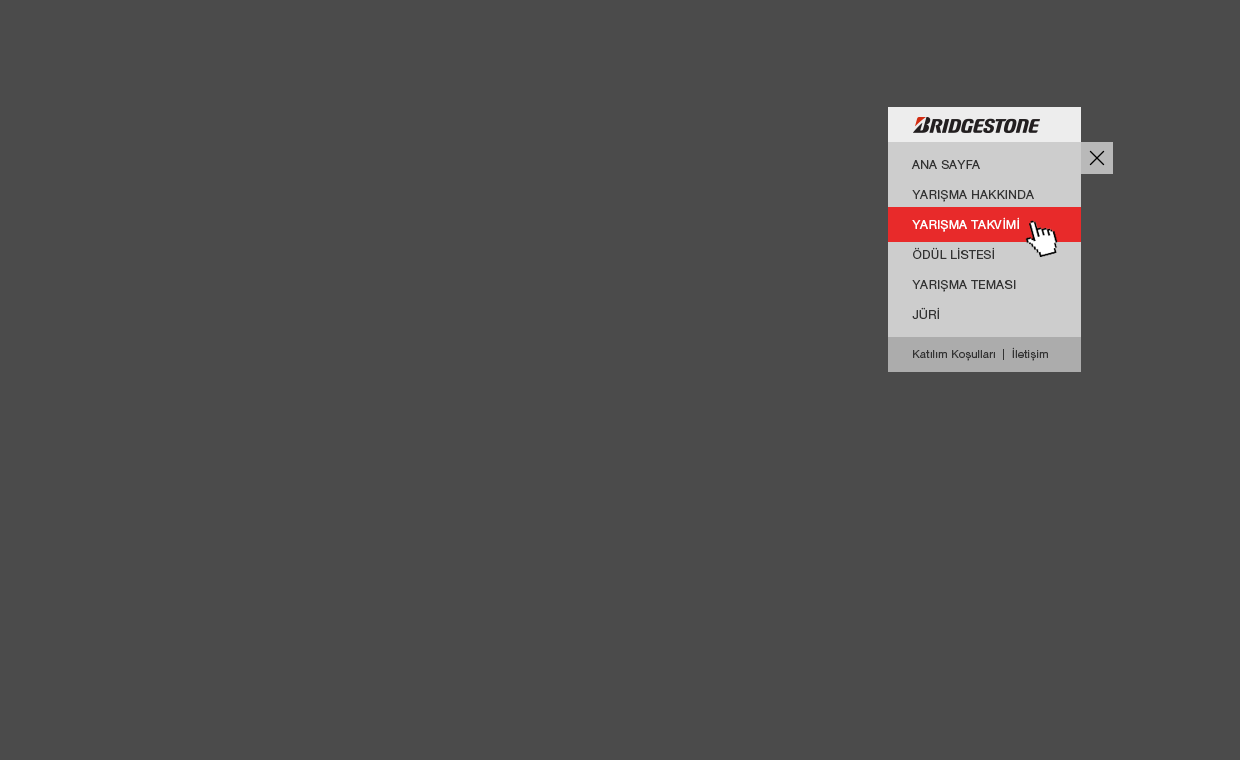
<style>
.page{position:relative;width:1240px;height:760px;background:#4b4b4b}
.page>*{position:absolute;margin:0}
.t1{font:12px/30px "HelveticaNeueLTPro-Roman";letter-spacing:0.026em;color:#333333}
.t2{font:12px/30px "HelveticaNeueLTPro-Roman";letter-spacing:0.026em;color:#ffffff}
.t3{font:11px "HelveticaNeueLTPro-Roman";letter-spacing:0.026em;color:#333333}
</style>
<div class="page">
<p class="t1" style="left:911px;top:160px;width:123px;height:159px">ANA SAYFA<br>YARIŞMA HAKKINDA<br><span class="t2">YARIŞMA TAKVİMİ<br></span>ÖDÜL LİSTESİ<br>YARIŞMA TEMASI<br>JÜRİ</p>
<p class="t3" style="left:913px;top:347px;width:135px;height:14px">Katılım Koşulları  |  İletişim</p>
</div>
